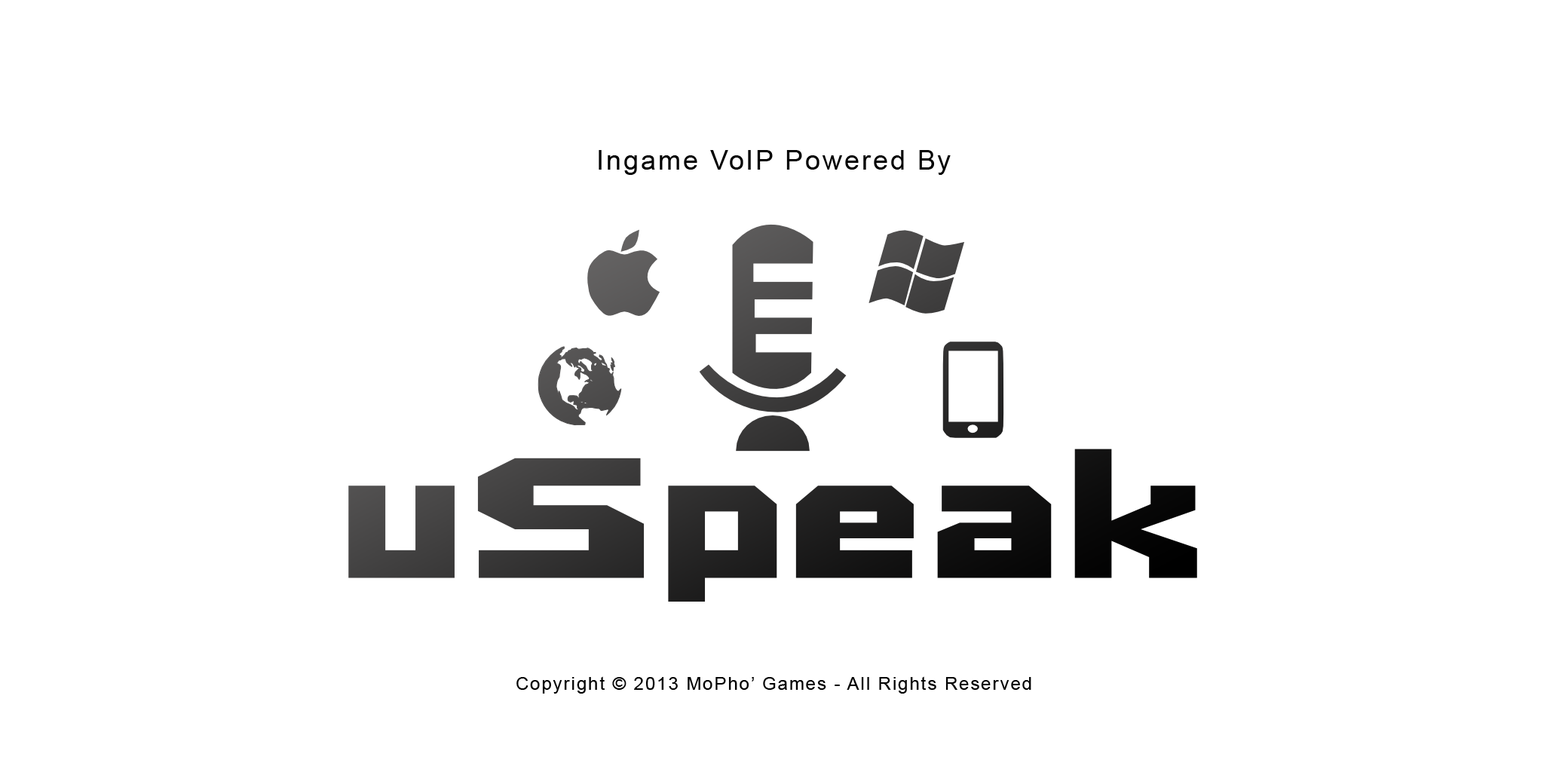
<style>
.page{position:relative;width:1544px;height:772px;background:#ffffff}
.page>*{position:absolute;margin:0}
.t1{font:27.1px "ArialMT";letter-spacing:0.08em;color:#000000}
.t2{font:18.1px "ArialMT";letter-spacing:0.08em;color:#000000}
</style>
<div class="page">
<p class="t1" style="left:599px;top:150px;width:352px;height:25px">Ingame VoIP Powered By</p>
<p class="t2" style="left:517px;top:676px;width:515px;height:18px">Copyright © 2013 MoPho’ Games - All Rights Reserved</p>
</div>
